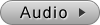
<style>
.page{position:relative;width:100px;height:25px}
.page>*{position:absolute;margin:0}
.t1{font:16px "ArialMT";letter-spacing:0.1em;color:#000000}
</style>
<div class="page">
<p class="t1" style="left:20px;top:4px;width:49px;height:19px">Audio</p>
</div>
